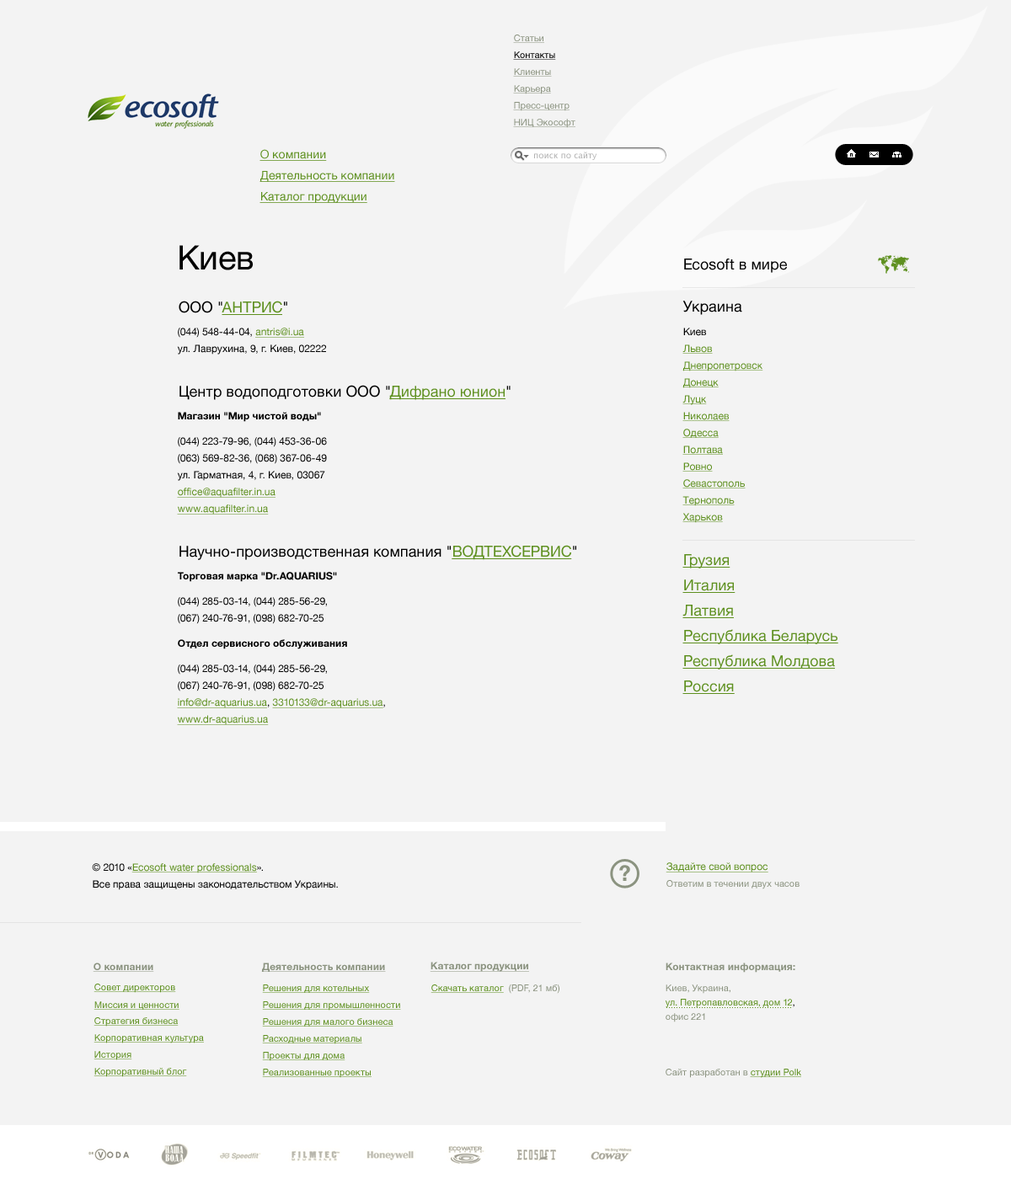
<style>
.page{position:relative;width:1011px;height:1179px;background:#f3f3f3}
.page>*{position:absolute;margin:0}
.t1{font:9.3px "HelveticaNeue";color:#8b9380;text-decoration:underline}
.t2{font:9.3px "HelveticaNeue";color:#000000;text-decoration:underline}
.t3{font:11.8px "HelveticaNeue";color:#5e901f;text-decoration:underline}
.t4{font:8.4px "LucidaGrande";color:#b2b2b2}
.t5{font:33.7px "HelveticaNeue";color:#000000}
.t6{font:15.2px "HelveticaNeue";color:#000000}
.t7{font:15.2px "HelveticaNeue";color:#5e901f;text-decoration:underline}
.t8{font:10.1px/16.8px "HelveticaNeue";color:#000000}
.t9{font:10.1px/16.8px "HelveticaNeue";color:#5e901f;text-decoration:underline}
.t10{font:10.1px "HelveticaNeue-Bold";color:#000000}
.t11{font:15.2px/25.3px "HelveticaNeue";color:#5e901f;text-decoration:underline}
.t12{font:10.1px "HelveticaNeue";color:#5e901f;text-decoration:underline}
.t13{font:9.3px "HelveticaNeue";color:#8b9380}
.t14{font:10.1px "HelveticaNeue-Bold";color:#8b9380;text-decoration:underline}
.t15{font:9.3px/14.3px "HelveticaNeue";color:#5e901f}
.t16{font:10.1px/16.8px "HelveticaNeue-Bold";color:#8b9380}
.t17{font:9.3px/21.1px "HelveticaNeue";color:#8b9380}
.t18{font:9.3px/14.3px "HelveticaNeue";color:#000000}
.t19{font:9.3px/14.3px "HelveticaNeue";color:#8b9380}
.t20{font:9.3px "HelveticaNeue";color:#5e901f;text-decoration:underline}
</style>
<div class="page">
<p class="t1" style="left:513px;top:35px;width:31px;height:8px">Статьи</p>
<p class="t2" style="left:513px;top:51px;width:43px;height:9px">Контакты</p>
<p class="t1" style="left:513px;top:68px;width:39px;height:9px">Клиенты</p>
<p class="t1" style="left:513px;top:85px;width:38px;height:9px">Карьера</p>
<p class="t1" style="left:513px;top:102px;width:57px;height:9px">Пресс-центр</p>
<p class="t1" style="left:513px;top:119px;width:62px;height:9px">НИЦ Экософт</p>
<p class="t3" style="left:259px;top:149px;width:68px;height:12px">О компании</p>
<p class="t4" style="left:534px;top:152px;width:63px;height:8px">поиск по сайту</p>
<p class="t3" style="left:259px;top:171px;width:136px;height:11px">Деятельность компании</p>
<p class="t3" style="left:259px;top:192px;width:108px;height:11px">Каталог продукции</p>
<p class="t5" style="left:179px;top:245px;width:74px;height:25px">Киев</p>
<p class="t6" style="left:684px;top:259px;width:103px;height:14px">Ecosoft в мире</p>
<p class="t7" style="left:179px;top:301px;width:108px;height:14px"><span class="t6">ООО "</span>АНТРИС<span class="t6">"</span></p>
<p class="t6" style="left:682px;top:301px;width:60px;height:14px">Украина</p>
<p class="t8" style="left:177px;top:328px;width:149px;height:27px">(044) 548-44-04, <span class="t9">antris@i.ua<br></span>ул. Лаврухина, 9, г. Киев, 02222</p>
<p class="t9" style="left:682px;top:328px;width:81px;height:195px"><span class="t8">Киев<br></span>Львов<br>Днепропетровск<br>Донецк<br>Луцк<br>Николаев<br>Одесса<br>Полтава<br>Ровно<br>Севастополь<br>Тернополь<br>Харьков</p>
<p class="t6" style="left:179px;top:385px;width:332px;height:15px">Центр водоподготовки ООО "<span class="t7">Дифрано юнион</span>"</p>
<p class="t10" style="left:178px;top:412px;width:143px;height:10px">Магазин "Мир чистой воды"</p>
<p class="t8" style="left:177px;top:437px;width:150px;height:78px">(044) 223-79-96, (044) 453-36-06<br>(063) 569-82-36, (068) 367-06-49<br>ул. Гарматная, 4, г. Киев, 03067<br><span class="t9">office@aquafilter.in.ua<br>www.aquafilter.in.ua</span></p>
<p class="t6" style="left:179px;top:545px;width:397px;height:15px">Научно-производственная компания "<span class="t7">ВОДТЕХСЕРВИС</span>"</p>
<p class="t11" style="left:682px;top:554px;width:156px;height:140px">Грузия<br>Италия<br>Латвия<br>Республика Беларусь<br>Республика Молдова<br>Россия</p>
<p class="t10" style="left:178px;top:572px;width:159px;height:10px">Торговая марка "Dr.AQUARIUS"</p>
<p class="t8" style="left:178px;top:597px;width:149px;height:27px">(044) 285-03-14, (044) 285-56-29,<br>(067) 240-76-91, (098) 682-70-25</p>
<p class="t10" style="left:178px;top:639px;width:169px;height:11px">Отдел сервисного обслуживания</p>
<p class="t8" style="left:177px;top:665px;width:208px;height:60px">(044) 285-03-14, (044) 285-56-29,<br>(067) 240-76-91, (098) 682-70-25<br><span class="t9">info@dr-aquarius.ua</span>, <span class="t9">3310133@dr-aquarius.ua</span>,<br><span class="t9">www.dr-aquarius.ua</span></p>
<p class="t8" style="left:92px;top:864px;width:246px;height:27px">© 2010 «<span class="t9">Ecosoft water professionals</span>».<br>Все права защищены законодательством Украины.</p>
<p class="t12" style="left:666px;top:863px;width:102px;height:10px">Задайте свой вопрос</p>
<p class="t13" style="left:666px;top:880px;width:134px;height:10px">Ответим в течении двух часов</p>
<p class="t14" style="left:93px;top:963px;width:61px;height:9px">О компании</p>
<p class="t14" style="left:261px;top:963px;width:125px;height:9px">Деятельность компании</p>
<p class="t14" style="left:430px;top:962px;width:99px;height:10px">Каталог продукции</p>
<p class="t15" style="left:665px;top:963px;width:130px;height:60px"><span class="t16">Контактная информация:<br></span><span class="t17">Киев, Украина,<br></span>ул. Петропавловская, дом 12<span class="t18">,<br></span><span class="t19">офис 221</span></p>
<p class="t20" style="left:94px;top:984px;width:82px;height:9px">Совет директоров</p>
<p class="t20" style="left:262px;top:985px;width:108px;height:8px">Решения для котельных</p>
<p class="t20" style="left:431px;top:985px;width:73px;height:8px">Скачать каталог</p>
<p class="t13" style="left:509px;top:985px;width:50px;height:9px">(PDF, 21 мб)</p>
<p class="t20" style="left:94px;top:1002px;width:85px;height:8px">Миссия и ценности</p>
<p class="t20" style="left:262px;top:1002px;width:139px;height:9px">Решения для промышленности</p>
<p class="t20" style="left:94px;top:1018px;width:85px;height:9px">Стратегия бизнеса</p>
<p class="t20" style="left:262px;top:1019px;width:131px;height:8px">Решения для малого бизнеса</p>
<p class="t20" style="left:94px;top:1035px;width:110px;height:9px">Корпоративная культура</p>
<p class="t20" style="left:262px;top:1035px;width:100px;height:10px">Расходные материалы</p>
<p class="t20" style="left:94px;top:1051px;width:38px;height:10px">История</p>
<p class="t20" style="left:262px;top:1052px;width:83px;height:10px">Проекты для дома</p>
<p class="t20" style="left:94px;top:1068px;width:93px;height:10px">Корпоративный блог</p>
<p class="t20" style="left:262px;top:1069px;width:110px;height:9px">Реализованные проекты</p>
<p class="t13" style="left:666px;top:1069px;width:135px;height:9px">Сайт разработан в <span class="t20">студии Polk</span></p>
</div>
